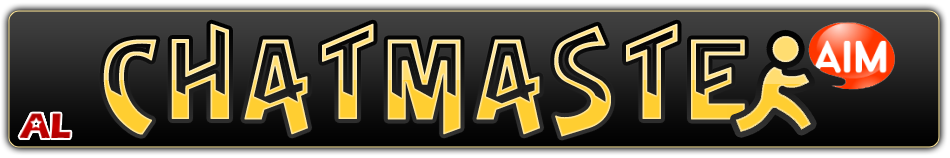
<style>
.page{position:relative;width:950px;height:158px}
.page>*{position:absolute;margin:0}
.t1{font:115.6px "HighNoon";letter-spacing:0.08em;text-transform:uppercase;font-weight:bold}
</style>
<div class="page">
<p class="t1" style="left:103px;top:23px;width:642px;height:114px">CHATMaSTE</p>
</div>
